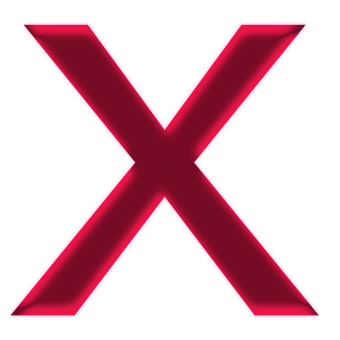
<style>
.page{position:relative;width:340px;height:340px;background:#ffffff}
.page>*{position:absolute;margin:0}
.t1{font:435.2px "SimHei";scale:1.56 1}
</style>
<div class="page">
<p class="t1" style="left:10px;top:24px;width:309px;height:292px">X</p>
</div>
